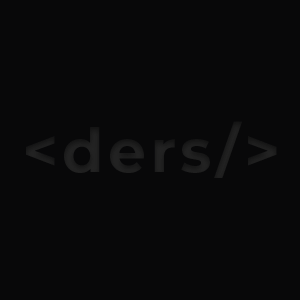
<style>
.page{position:relative;width:300px;height:300px;background:#080809}
.page>*{position:absolute;margin:0}
.t1{font:60px "Montserrat-Bold";letter-spacing:0.07em;color:#181818}
</style>
<div class="page">
<p class="t1" style="left:26px;top:121px;width:251px;height:57px">&lt;ders/&gt;</p>
</div>
